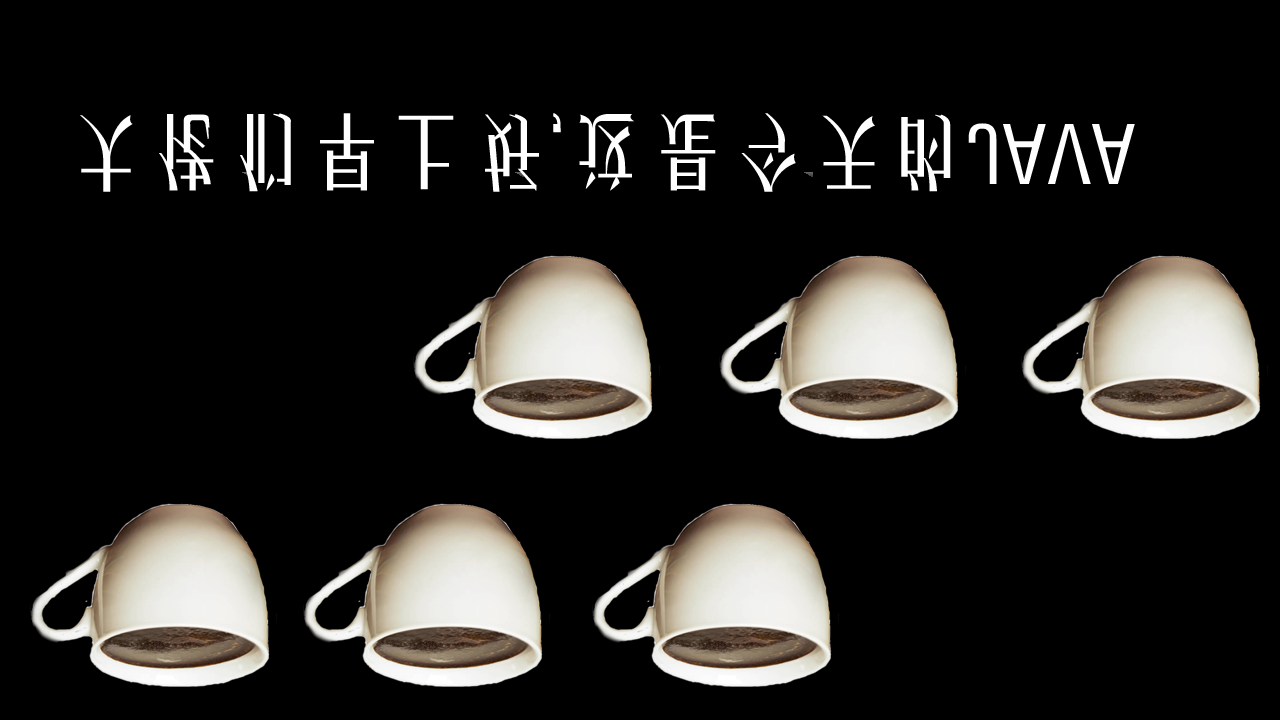
<style>
.page{position:relative;width:1280px;height:720px;background:#000000}
.page>*{position:absolute;margin:0}
.t1{font:80px "FZYTK--GBK1-0";color:#ffffff}
</style>
<div class="page">
<p class="t1" style="left:80px;top:113px;width:1055px;height:79px">大佬们早上好,这是今天的JAVA</p>
</div>
